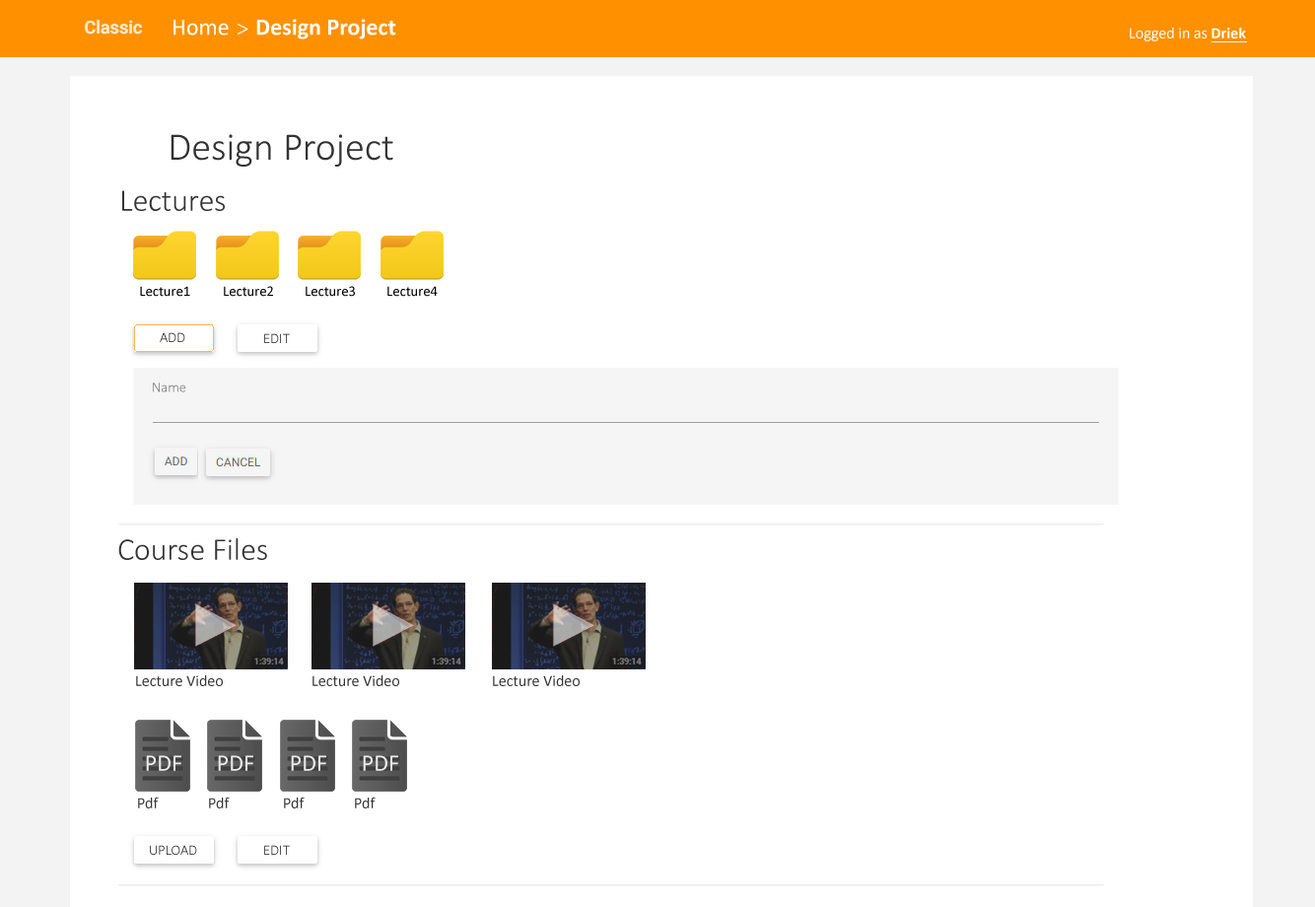
<style>
.page{position:relative;width:1315px;height:907px;background:#ffffff}
.page>*{position:absolute;margin:0}
.t1{font:23.7px "Calibri";color:#ffffff}
.t2{font:23.7px "Calibri-Light";color:#ffffff}
.t3{font:23.7px "Calibri-Bold";color:#ffffff}
.t4{font:15.8px "Calibri";color:#ffffff}
.t5{font:15.8px "Calibri-Bold";color:#ffffff}
.t6{font:39.4px "Calibri-Light";color:#333333}
.t7{font:31.5px "Calibri-Light";color:#333333}
.t8{font:14.5px "Calibri";color:#000000}
.t9{font:14.5px "Calibri-Light"}
.t10{font:14.5px "Calibri-Light";color:#777777}
.t11{font:15.8px "Calibri";color:#333333}
</style>
<div class="page">
<p class="t1" style="left:173px;top:20px;width:56px;height:15px">Home</p>
<p class="t2" style="left:238px;top:24px;width:10px;height:10px">&gt;</p>
<p class="t3" style="left:256px;top:19px;width:140px;height:20px">Design Project</p>
<p class="t4" style="left:1130px;top:28px;width:116px;height:13px">Logged in as <span class="t5">Driek</span></p>
<p class="t6" style="left:171px;top:134px;width:222px;height:33px">Design Project</p>
<p class="t7" style="left:122px;top:190px;width:103px;height:21px">Lectures</p>
<p class="t8" style="left:140px;top:286px;width:50px;height:11px">Lecture1</p>
<p class="t8" style="left:224px;top:286px;width:49px;height:11px">Lecture2</p>
<p class="t8" style="left:306px;top:286px;width:49px;height:11px">Lecture3</p>
<p class="t8" style="left:387px;top:286px;width:51px;height:11px">Lecture4</p>
<p class="t9" style="left:160px;top:332px;width:25px;height:10px">ADD</p>
<p class="t9" style="left:264px;top:333px;width:26px;height:10px">EDIT</p>
<p class="t10" style="left:153px;top:382px;width:33px;height:10px">Name</p>
<p class="t7" style="left:118px;top:538px;width:149px;height:22px">Course Files</p>
<p class="t11" style="left:136px;top:675px;width:87px;height:11px">Lecture Video</p>
<p class="t11" style="left:312px;top:675px;width:87px;height:11px">Lecture Video</p>
<p class="t11" style="left:493px;top:675px;width:87px;height:11px">Lecture Video</p>
<p class="t11" style="left:138px;top:796px;width:21px;height:12px">Pdf</p>
<p class="t11" style="left:209px;top:796px;width:21px;height:12px">Pdf</p>
<p class="t11" style="left:284px;top:796px;width:21px;height:12px">Pdf</p>
<p class="t11" style="left:355px;top:796px;width:21px;height:12px">Pdf</p>
<p class="t9" style="left:150px;top:845px;width:47px;height:10px">UPLOAD</p>
<p class="t9" style="left:264px;top:845px;width:26px;height:10px">EDIT</p>
</div>
